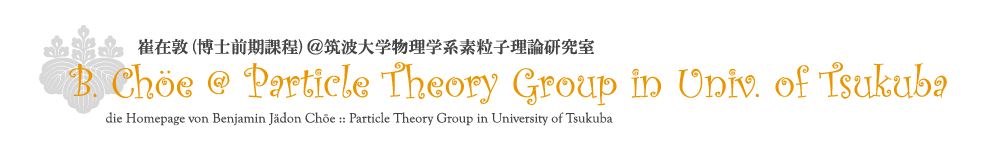
<style>
.page{position:relative;width:1000px;height:150px;background:#ffffff}
.page>*{position:absolute;margin:0}
.t1{font:16.9px "HGMinchoE";color:#444444}
.t2{font:43.8px "CurlzMT";color:#eb9600}
.t3{font:13.9px "GoudyOldStyleT-Regular";color:#444444}
</style>
<div class="page">
<p class="t1" style="left:138px;top:38px;width:456px;height:17px">崔在敦(博士前期課程)＠筑波大学物理学系素粒子理論研究室</p>
<p class="t2" style="left:69px;top:62px;width:878px;height:44px">B. Chöe @ Particle Theory Group in Univ. of Tsukuba</p>
<p class="t3" style="left:106px;top:112px;width:507px;height:14px">die Homepage von Benjamin Jädon Chöe :: Particle Theory Group in University of Tsukuba</p>
</div>
